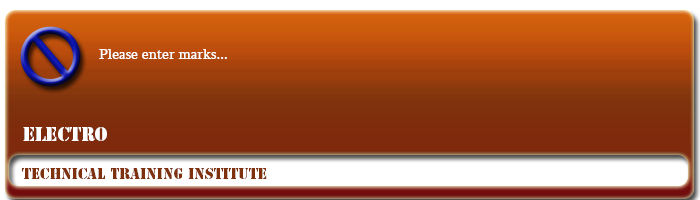
<style>
.page{position:relative;width:700px;height:200px}
.page>*{position:absolute;margin:0}
.t1{font:15px "Sylfaen";color:#ffffff}
.t2{font:18px "StencilStd";color:#ffffff}
.t3{font:14px "StencilStd";color:#7f300d}
</style>
<div class="page">
<p class="t1" style="left:99px;top:49px;width:128px;height:10px">Please enter marks...</p>
<p class="t2" style="left:23px;top:127px;width:84px;height:14px">ELECTRO</p>
<p class="t3" style="left:22px;top:168px;width:245px;height:11px">Technical Training Institute</p>
</div>
